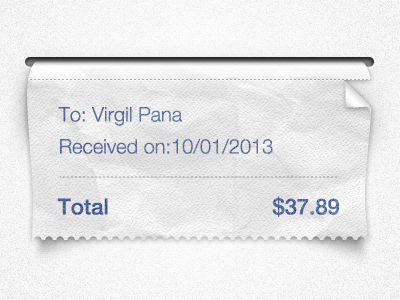
<style>
.page{position:relative;width:400px;height:300px}
.page>*{position:absolute;margin:0}
.t1{font:20px/32px "HelveticaNeueLTPro-Lt";color:#5c6e9b}
.t2{font:22px "HelveticaNeueLTPro-Md";color:#506499}
</style>
<div class="page">
<p class="t1" style="left:58px;top:107px;width:215px;height:47px">To: Virgil Pana<br>Received on:10/01/2013</p>
<p class="t2" style="left:57px;top:196px;width:282px;height:21px">Total                            $37.89</p>
</div>
